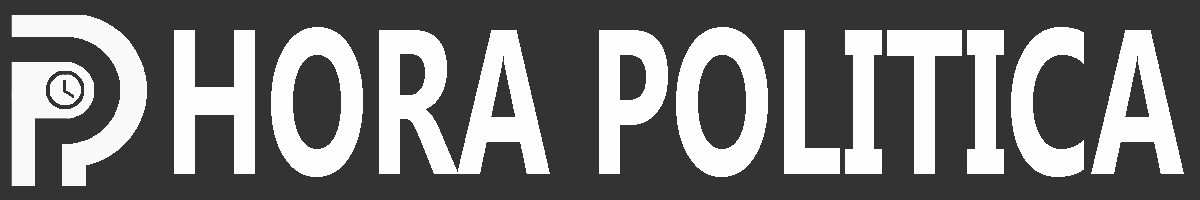
<style>
.page{position:relative;width:1200px;height:200px;background:#333333}
.page>*{position:absolute;margin:0}
.t1{font:205px "MyanmarText-Bold";color:#fefefe;scale:0.66 1}
</style>
<div class="page">
<p class="t1" style="left:174px;top:27px;width:1010px;height:150px">HORA POLITICA</p>
</div>
